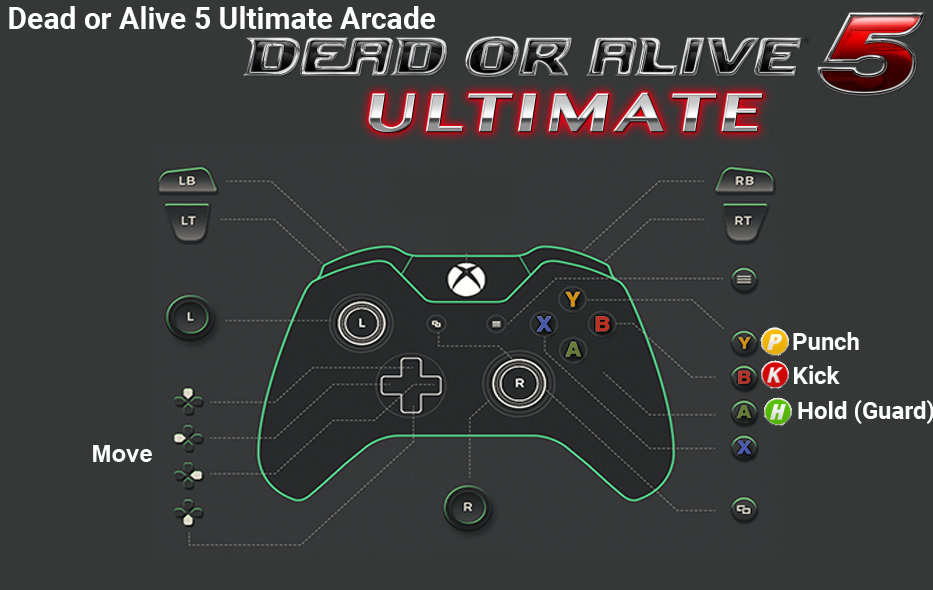
<style>
.page{position:relative;width:933px;height:590px;background:#363838}
.page>*{position:absolute;margin:0}
.t1{font:30px "Roboto-Bold";color:#ffffff}
.t2{font:24px "Roboto-Bold";color:#ffffff}
.t3{font:24px "Arial-BoldMT";color:#fefefe}
</style>
<div class="page">
<p class="t1" style="left:9px;top:6px;width:426px;height:23px">Dead or Alive 5 Ultimate Arcade</p>
<p class="t2" style="left:793px;top:332px;width:66px;height:18px">Punch</p>
<p class="t2" style="left:794px;top:365px;width:46px;height:19px">Kick</p>
<p class="t2" style="left:798px;top:400px;width:136px;height:24px">Hold (Guard)</p>
<p class="t3" style="left:93px;top:445px;width:59px;height:17px">Move</p>
</div>
